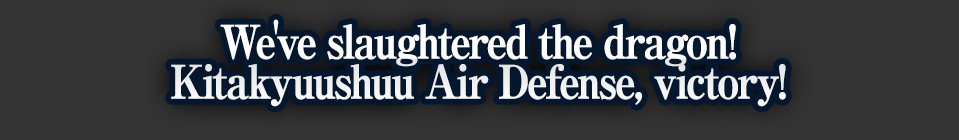
<style>
.page{position:relative;width:959px;height:140px;background:#333333}
.page>*{position:absolute;margin:0}
.t1{font:46px/40px "RyuminPro-ExBold";letter-spacing:-0.08em;color:#ffffff;font-weight:bold;scale:0.9 1}
</style>
<div class="page">
<p class="t1" style="left:171px;top:19px;width:615px;height:88px;text-align:center">We've slaughtered the dragon!<br>Kitakyuushuu Air Defense, victory!</p>
</div>
